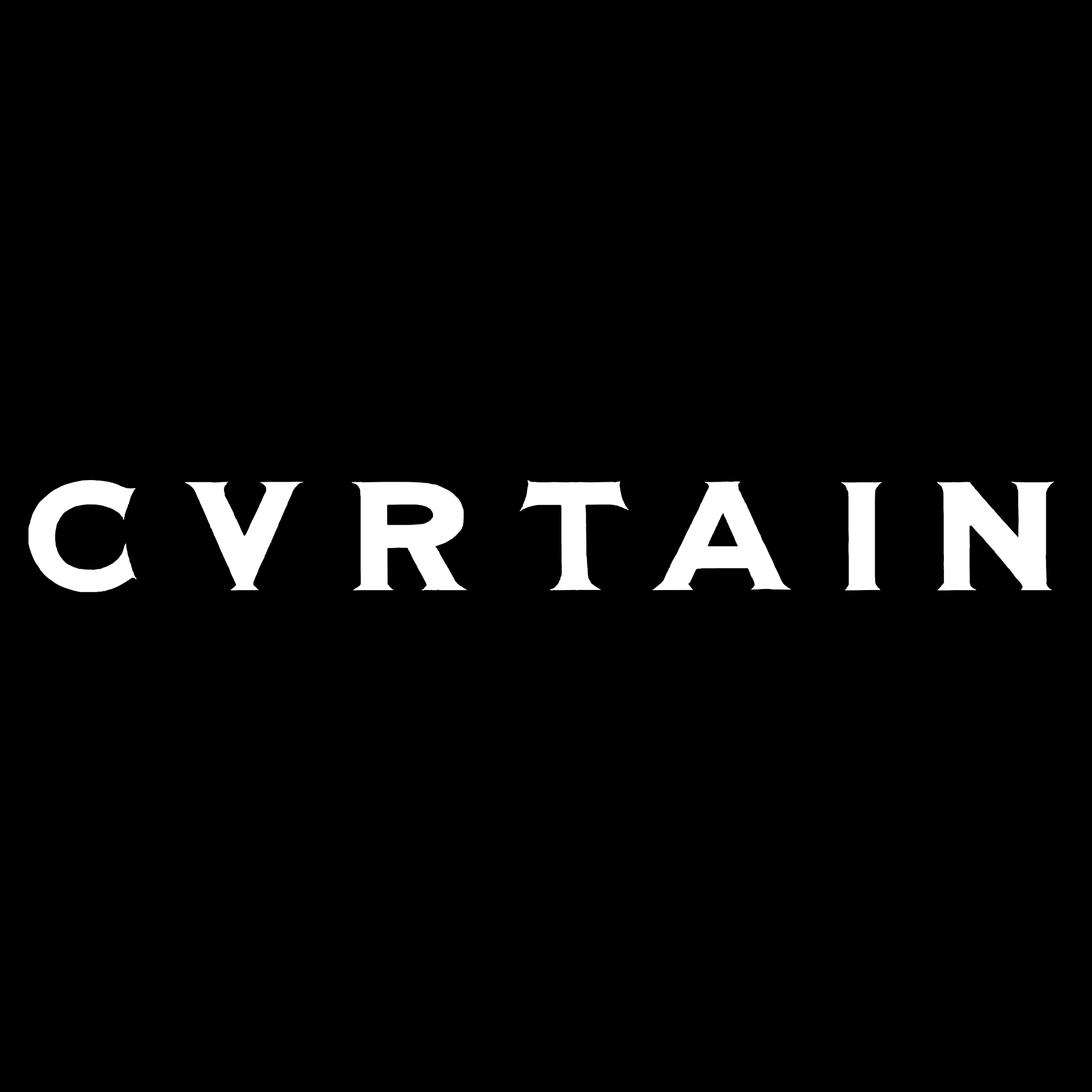
<style>
.page{position:relative;width:1092px;height:1092px;background:#000000}
.page>*{position:absolute;margin:0}
.t1{font:171.4px "JophetWF";letter-spacing:0.185em;color:#ffffff;scale:1.16 1}
</style>
<div class="page">
<p class="t1" style="left:28px;top:480px;width:1026px;height:112px">CVRTAIN</p>
</div>
